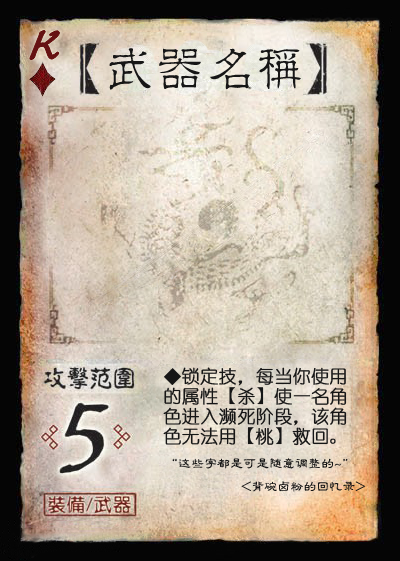
<style>
.page{position:relative;width:400px;height:561px}
.page>*{position:absolute;margin:0}
.t1{font:50px "Jxixinkai";color:#661213;font-weight:bold;font-style:italic}
.t2{font:50px "¾­µä·±½ÇÁ¥ Regular";color:#161616}
.t3{font:18px "YouYuan";color:#161616;font-weight:bold}
.t4{font:18px "DFPWaWaW5";color:#161616;font-weight:bold}
.t5{font:13px "FZLBJW--GB1-0";color:#161616}
</style>
<div class="page">
<p class="t1" style="left:30px;top:30px;width:30px;height:30px">K</p>
<p class="t2" style="left:109px;top:48px;width:192px;height:42px">武器名称</p>
<p class="t3" style="left:164px;top:367px;width:182px;height:19px">◆锁定技，每当你使用</p>
<p class="t3" style="left:164px;top:387px;width:183px;height:18px">的属性<span class="t4">【</span>杀<span class="t4">】</span>使一名角</p>
<p class="t3" style="left:163px;top:407px;width:184px;height:19px">色进入濒死阶段，该角</p>
<p class="t3" style="left:163px;top:427px;width:173px;height:19px">色无法用<span class="t4">【</span>桃<span class="t4">】</span>救回。</p>
<p class="t5" style="left:172px;top:458px;width:176px;height:11px">“这些字都是可是随意调整的~”</p>
<p class="t5" style="left:241px;top:481px;width:125px;height:11px">&lt;背碗卤粉的回忆录&gt;</p>
</div>
